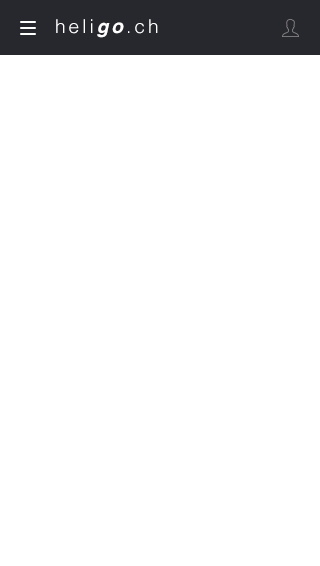
<style>
.page{position:relative;width:320px;height:566px;background:#ffffff}
.page>*{position:absolute;margin:0}
.t1{font:19px "Helvetica-Light";letter-spacing:0.16em;color:#ffffff}
.t2{font:19px "Helvetica-BoldOblique";letter-spacing:0.16em;color:#ffffff}
</style>
<div class="page">
<p class="t1" style="left:56px;top:19px;width:102px;height:19px">heli<span class="t2">go</span>.ch</p>
</div>
